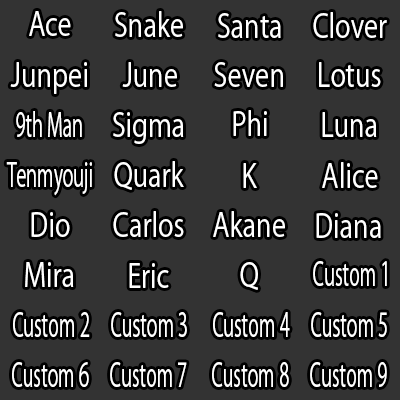
<style>
.page{position:relative;width:400px;height:400px;background:#333333}
.page>*{position:absolute;margin:0}
.t1{font:32.8px "KozGoPr6N-Regular";color:#ffffff;scale:0.8 1}
.t2{font:32.8px "KozGoPr6N-Regular";color:#ffffff;scale:0.56 1}
</style>
<div class="page">
<p class="t1" style="left:29px;top:11px;width:42px;height:25px">Ace</p>
<p class="t1" style="left:115px;top:11px;width:68px;height:26px">Snake</p>
<p class="t1" style="left:218px;top:13px;width:63px;height:25px">Santa</p>
<p class="t1" style="left:313px;top:12px;width:74px;height:26px">Clover</p>
<p class="t1" style="left:10px;top:62px;width:77px;height:32px">Junpei</p>
<p class="t1" style="left:122px;top:62px;width:55px;height:25px">June</p>
<p class="t1" style="left:214px;top:62px;width:69px;height:25px">Seven</p>
<p class="t1" style="left:319px;top:62px;width:62px;height:25px">Lotus</p>
<p class="t2" style="left:16px;top:111px;width:66px;height:26px">9th Man</p>
<p class="t1" style="left:113px;top:112px;width:71px;height:32px">Sigma</p>
<p class="t1" style="left:233px;top:110px;width:34px;height:26px">Phi</p>
<p class="t1" style="left:322px;top:112px;width:55px;height:25px">Luna</p>
<p class="t1" style="left:114px;top:161px;width:70px;height:29px">Quark</p>
<p class="t2" style="left:6px;top:162px;width:86px;height:34px">Tenmyouji</p>
<p class="t1" style="left:243px;top:163px;width:14px;height:25px">K</p>
<p class="t1" style="left:322px;top:162px;width:56px;height:26px">Alice</p>
<p class="t1" style="left:31px;top:212px;width:39px;height:25px">Dio</p>
<p class="t1" style="left:113px;top:211px;width:71px;height:26px">Carlos</p>
<p class="t1" style="left:213px;top:211px;width:72px;height:26px">Akane</p>
<p class="t1" style="left:316px;top:213px;width:65px;height:25px">Diana</p>
<p class="t1" style="left:25px;top:262px;width:49px;height:25px">Mira</p>
<p class="t1" style="left:129px;top:263px;width:40px;height:25px">Eric</p>
<p class="t1" style="left:240px;top:262px;width:18px;height:28px">Q</p>
<p class="t2" style="left:313px;top:261px;width:74px;height:25px">Custom 1</p>
<p class="t2" style="left:13px;top:312px;width:77px;height:25px">Custom 2</p>
<p class="t2" style="left:111px;top:312px;width:76px;height:25px">Custom 3</p>
<p class="t2" style="left:213px;top:312px;width:77px;height:25px">Custom 4</p>
<p class="t2" style="left:311px;top:312px;width:76px;height:25px">Custom 5</p>
<p class="t2" style="left:12px;top:362px;width:77px;height:25px">Custom 6</p>
<p class="t2" style="left:110px;top:362px;width:77px;height:25px">Custom 7</p>
<p class="t2" style="left:212px;top:362px;width:77px;height:25px">Custom 8</p>
<p class="t2" style="left:310px;top:362px;width:77px;height:25px">Custom 9</p>
</div>
